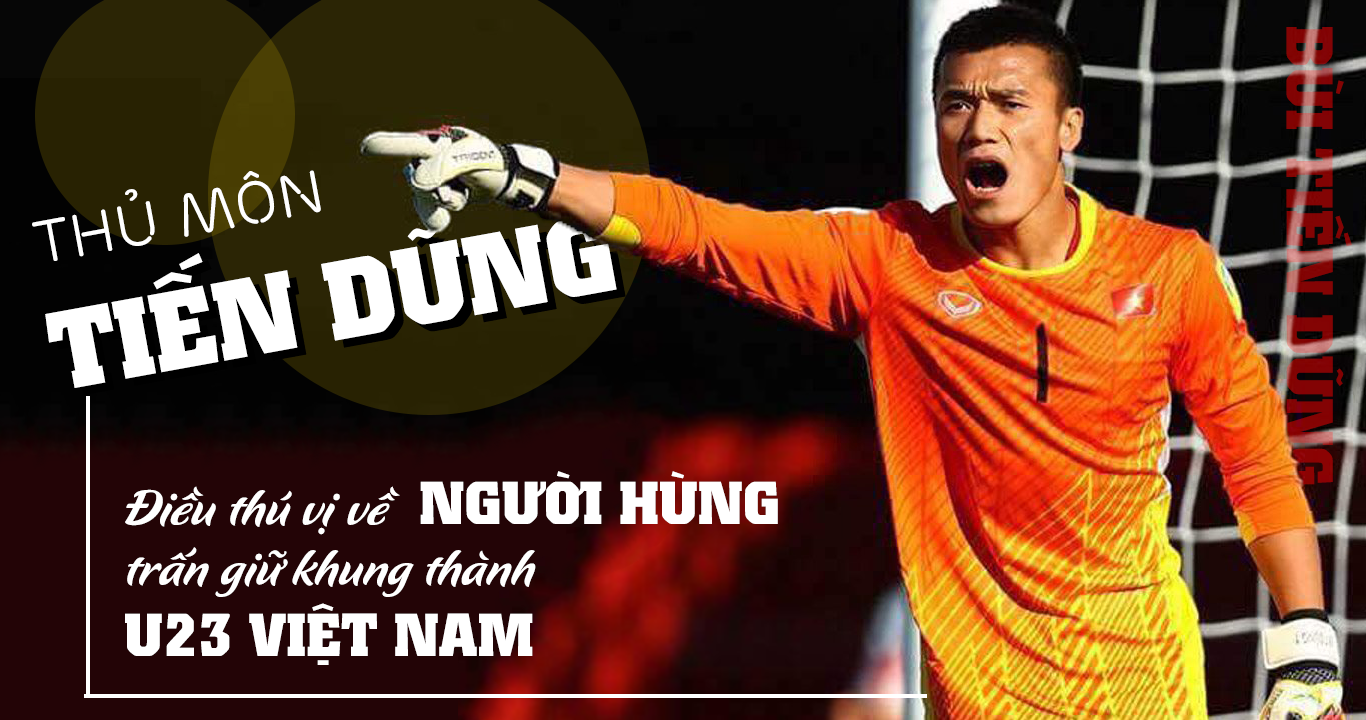
<style>
.page{position:relative;width:1366px;height:720px}
.page>*{position:absolute;margin:0}
.t1{font:65px "UTM-Colossalis"}
.t2{font:60px "UTM-Ericsson-Capital";color:#ffffff}
.t3{font:110px "UTM-Colossalis";color:#ffffff}
.t4{font:110px "UTM-Colossalis"}
.t5{font:50px "UTM-Flavour";color:#ffffff}
.t6{font:60px "UTM-Colossalis";color:#ffffff}
</style>
<div class="page">
<p class="t1" style="left:1286px;top:27px;width:66px;height:458px;rotate:90deg">BÙI TIẾN DŨNG</p>
<p class="t2" style="left:32px;top:170px;width:289px;height:91px;rotate:-11deg">THỦ MÔN</p>
<p class="t3" style="left:45px;top:213px;width:572px;height:175px;rotate:-10deg">TIẾN DŨNG</p>
<p class="t4" style="left:54px;top:220px;width:572px;height:175px;rotate:-10deg">TIẾN DŨNG</p>
<p class="t5" style="left:125px;top:471px;width:653px;height:194px">Điều thú vị về<span class="t6">  NGƯỜI HÙNG<br></span>trấn giữ khung thành<br><span class="t6">U23 VIỆT NAM</span></p>
</div>
